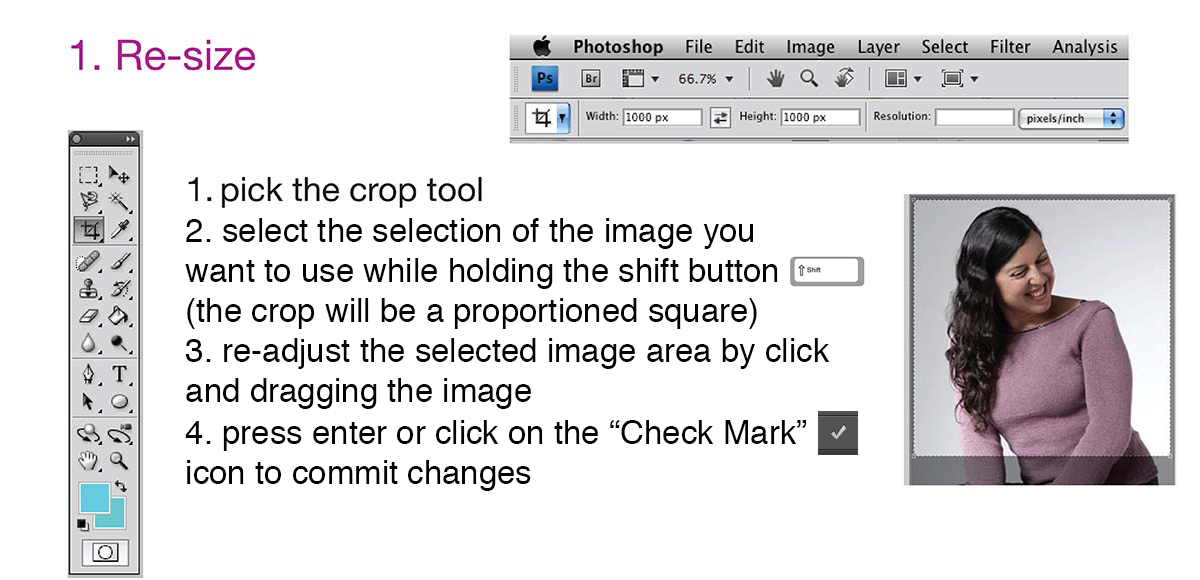
<style>
.page{position:relative;width:1200px;height:580px;background:#ffffff}
.page>*{position:absolute;margin:0}
.t1{font:33px "Helvetica";color:#020202}
</style>
<div class="page">
<p class="t1" style="left:185px;top:218px;width:593px;height:111px">2. select the selection of the image you<br>want to use while holding the shift button<br>(the crop will be a proportioned square)</p>
<p class="t1" style="left:185px;top:338px;width:645px;height:71px">3. re-adjust the selected image area by click<br>and dragging the image</p>
<p class="t1" style="left:185px;top:420px;width:622px;height:71px">4. press enter or click on the “Check Mark” <br>icon to commit changes</p>
</div>
